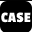
<style>
.page{position:relative;width:32px;height:32px;background:#000000}
.page>*{position:absolute;margin:0}
.t1{font:15px "PassionOne-Bold";letter-spacing:0.04em;color:#ffffff;scale:0.94 1}
</style>
<div class="page">
<p class="t1" style="left:1px;top:11px;width:30px;height:11px">CASE</p>
</div>
